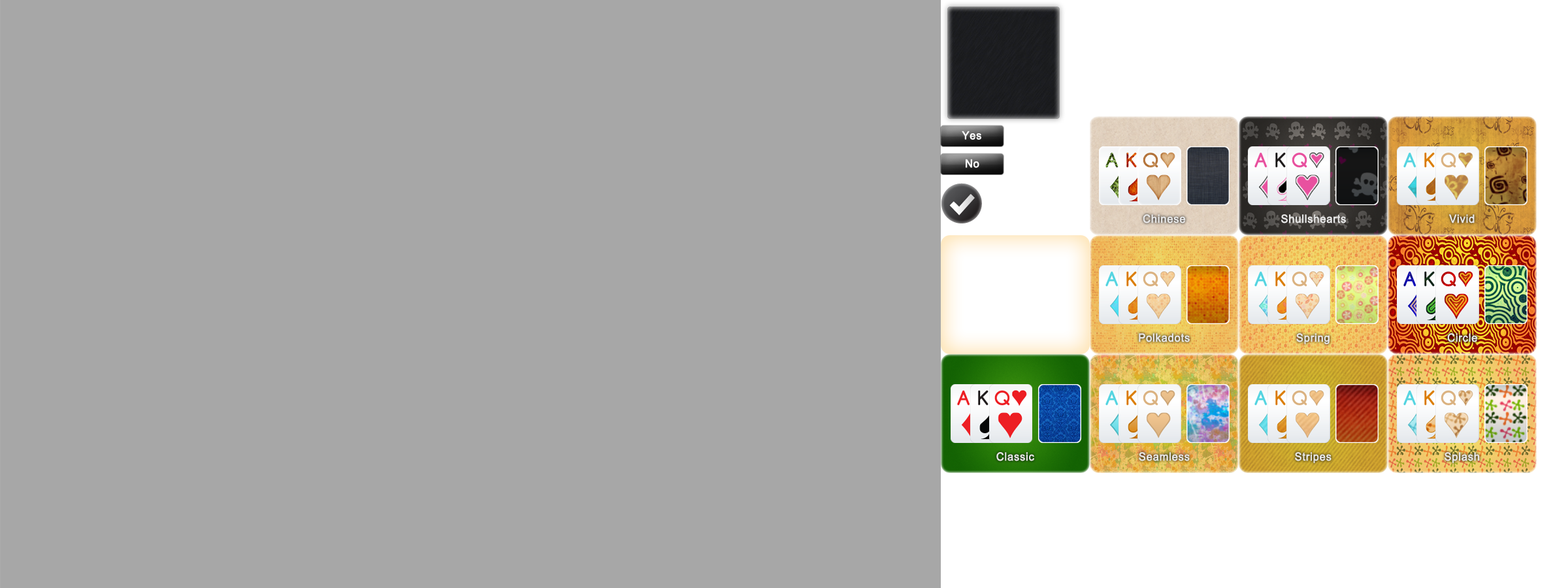
<style>
.page{position:relative;width:1568px;height:588px;background:#a7a7a7}
.page>*{position:absolute;margin:0}
.t1{font:11.1px "ArialMT";letter-spacing:0.025em;color:#ffffff;font-weight:bold;scale:0.95 1}
.t2{font:11.2px "ArialMT";letter-spacing:0.025em;color:#e6e6e6;font-weight:bold;scale:0.95 1}
</style>
<div class="page">
<p class="t1" style="left:962px;top:131px;width:19px;height:9px">Yes</p>
<p class="t1" style="left:966px;top:159px;width:13px;height:9px">No</p>
<p class="t2" style="left:1143px;top:214px;width:43px;height:9px">Chinese</p>
<p class="t2" style="left:1281px;top:214px;width:65px;height:9px">Shullshearts</p>
<p class="t2" style="left:1449px;top:214px;width:26px;height:9px">Vivid</p>
<p class="t2" style="left:1139px;top:333px;width:51px;height:9px">Polkadots</p>
<p class="t2" style="left:1296px;top:333px;width:34px;height:11px">Spring</p>
<p class="t2" style="left:1447px;top:333px;width:30px;height:9px">Circle</p>
<p class="t2" style="left:996px;top:452px;width:38px;height:9px">Classic</p>
<p class="t2" style="left:1139px;top:452px;width:51px;height:9px">Seamless</p>
<p class="t2" style="left:1295px;top:452px;width:36px;height:11px">Stripes</p>
<p class="t2" style="left:1445px;top:452px;width:35px;height:11px">Splash</p>
</div>
